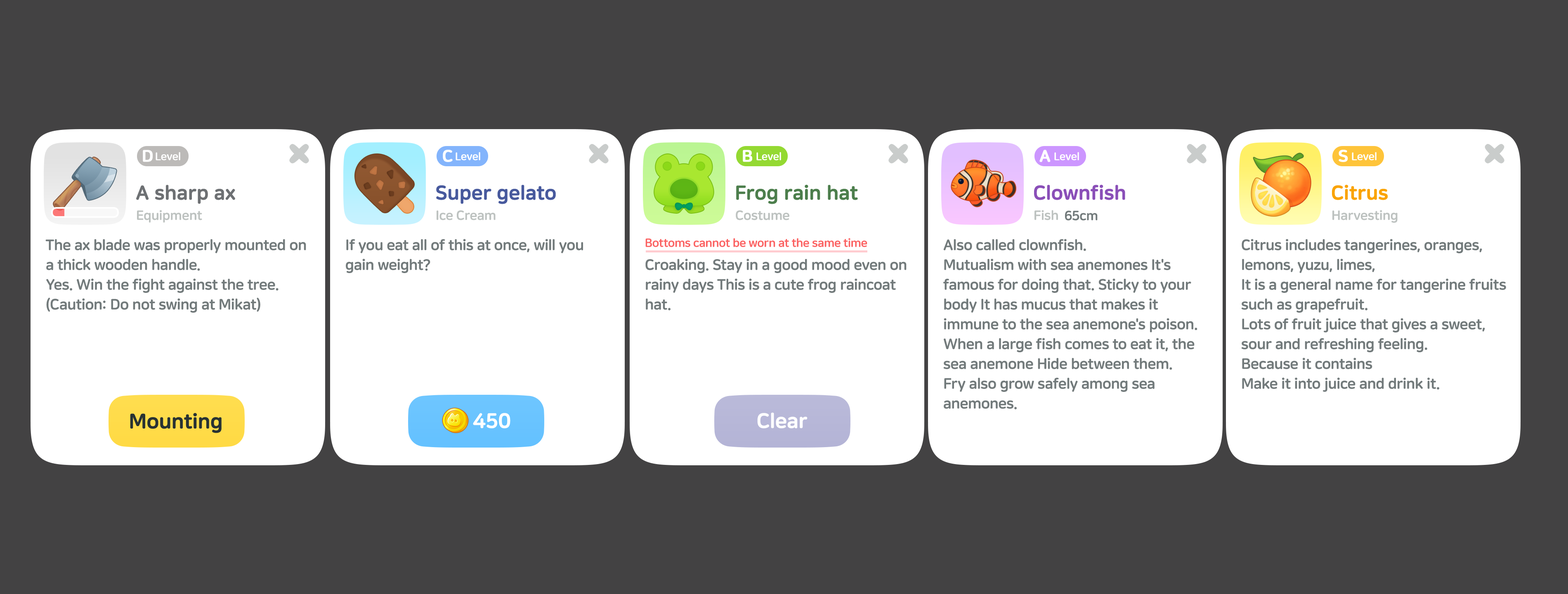
<style>
.page{position:relative;width:1568px;height:594px;background:#434243}
.page>*{position:absolute;margin:0}
.t1{font:16.5px "NanumSquareRoundEB";letter-spacing:-0.02em;color:#ffffff;font-weight:bold}
.t2{font:10.7px "NanumSquareRoundEB";letter-spacing:-0.02em;color:#ffffff}
.t3{font:19.8px "NanumSquareRoundEB";letter-spacing:-0.02em;color:#6d7073;font-weight:bold}
.t4{font:19.8px "NanumSquareRoundEB";letter-spacing:-0.02em;color:#47599d;font-weight:bold}
.t5{font:19.8px "NanumSquareRoundEB";letter-spacing:-0.02em;color:#4c7e4c;font-weight:bold}
.t6{font:19.8px "NanumSquareRoundEB";letter-spacing:-0.02em;color:#8a4fb8;font-weight:bold}
.t7{font:19.8px "NanumSquareRoundEB";letter-spacing:-0.02em;color:#faa300;font-weight:bold}
.t8{font:13.2px "NanumSquareRoundEB";letter-spacing:-0.02em;color:#bdc2c0}
.t9{font:13.2px "NanumSquareRoundEB";letter-spacing:-0.02em;color:#727a7b}
.t10{font:14.9px/19.8px "NanumSquareRoundEB";letter-spacing:-0.02em;color:#727a7b}
.t11{font:11.6px "NanumSquareRoundEB";letter-spacing:-0.02em;color:#fb6262}
.t12{font:20.6px "NanumSquareRoundEB";letter-spacing:-0.02em;color:#283233;font-weight:bold}
.t13{font:20.6px "NanumSquareRoundEB";letter-spacing:-0.02em;color:#ffffff;font-weight:bold}
</style>
<div class="page">
<p class="t1" style="left:143px;top:150px;width:10px;height:12px">D</p>
<p class="t1" style="left:443px;top:150px;width:10px;height:12px">C</p>
<p class="t1" style="left:743px;top:150px;width:9px;height:12px">B</p>
<p class="t1" style="left:1039px;top:150px;width:12px;height:12px">A</p>
<p class="t1" style="left:1339px;top:150px;width:9px;height:12px">S</p>
<p class="t2" style="left:156px;top:152px;width:24px;height:9px">Level</p>
<p class="t2" style="left:456px;top:152px;width:24px;height:9px">Level</p>
<p class="t2" style="left:756px;top:152px;width:25px;height:9px">Level</p>
<p class="t2" style="left:1054px;top:152px;width:25px;height:9px">Level</p>
<p class="t2" style="left:1352px;top:152px;width:25px;height:9px">Level</p>
<p class="t3" style="left:136px;top:185px;width:99px;height:19px">A sharp ax</p>
<p class="t4" style="left:436px;top:185px;width:120px;height:19px">Super gelato</p>
<p class="t5" style="left:736px;top:185px;width:122px;height:19px">Frog rain hat</p>
<p class="t6" style="left:1034px;top:185px;width:91px;height:15px">Clownfish</p>
<p class="t7" style="left:1332px;top:185px;width:56px;height:15px">Citrus</p>
<p class="t8" style="left:137px;top:210px;width:65px;height:13px">Equipment</p>
<p class="t8" style="left:437px;top:210px;width:59px;height:10px">Ice Cream</p>
<p class="t8" style="left:736px;top:210px;width:53px;height:10px">Costume</p>
<p class="t8" style="left:1034px;top:210px;width:24px;height:10px">Fish</p>
<p class="t9" style="left:1065px;top:210px;width:33px;height:11px">65cm</p>
<p class="t8" style="left:1332px;top:210px;width:66px;height:13px">Harvesting</p>
<p class="t10" style="left:45px;top:239px;width:261px;height:74px">The ax blade was properly mounted on<br>a thick wooden handle.<br>Yes. Win the fight against the tree.<br>(Caution: Do not swing at Mikat)</p>
<p class="t10" style="left:346px;top:239px;width:237px;height:34px">If you eat all of this at once, will you <br>gain weight?</p>
<p class="t11" style="left:645px;top:238px;width:222px;height:9px">Bottoms cannot be worn at the same time</p>
<p class="t10" style="left:943px;top:239px;width:254px;height:171px">Also called clownfish. <br>Mutualism with sea anemones It's <br>famous for doing that. Sticky to your<br>body It has mucus that makes it <br>immune to the sea anemone's poison.<br>When a large fish comes to eat it, the <br>sea anemone Hide between them. <br>Fry also grow safely among sea <br>anemones.</p>
<p class="t10" style="left:1241px;top:239px;width:265px;height:153px">Citrus includes tangerines, oranges, <br>lemons, yuzu, limes,<br>It is a general name for tangerine fruits<br>such as grapefruit.<br>Lots of fruit juice that gives a sweet, <br>sour and refreshing feeling.<br>Because it contains<br>Make it into juice and drink it.</p>
<p class="t10" style="left:645px;top:259px;width:262px;height:52px">Croaking. Stay in a good mood even on<br>rainy days This is a cute frog raincoat<br>hat.</p>
<p class="t12" style="left:130px;top:413px;width:92px;height:20px">Mounting</p>
<p class="t13" style="left:473px;top:413px;width:37px;height:16px">450</p>
<p class="t13" style="left:757px;top:413px;width:51px;height:16px">Clear</p>
</div>
